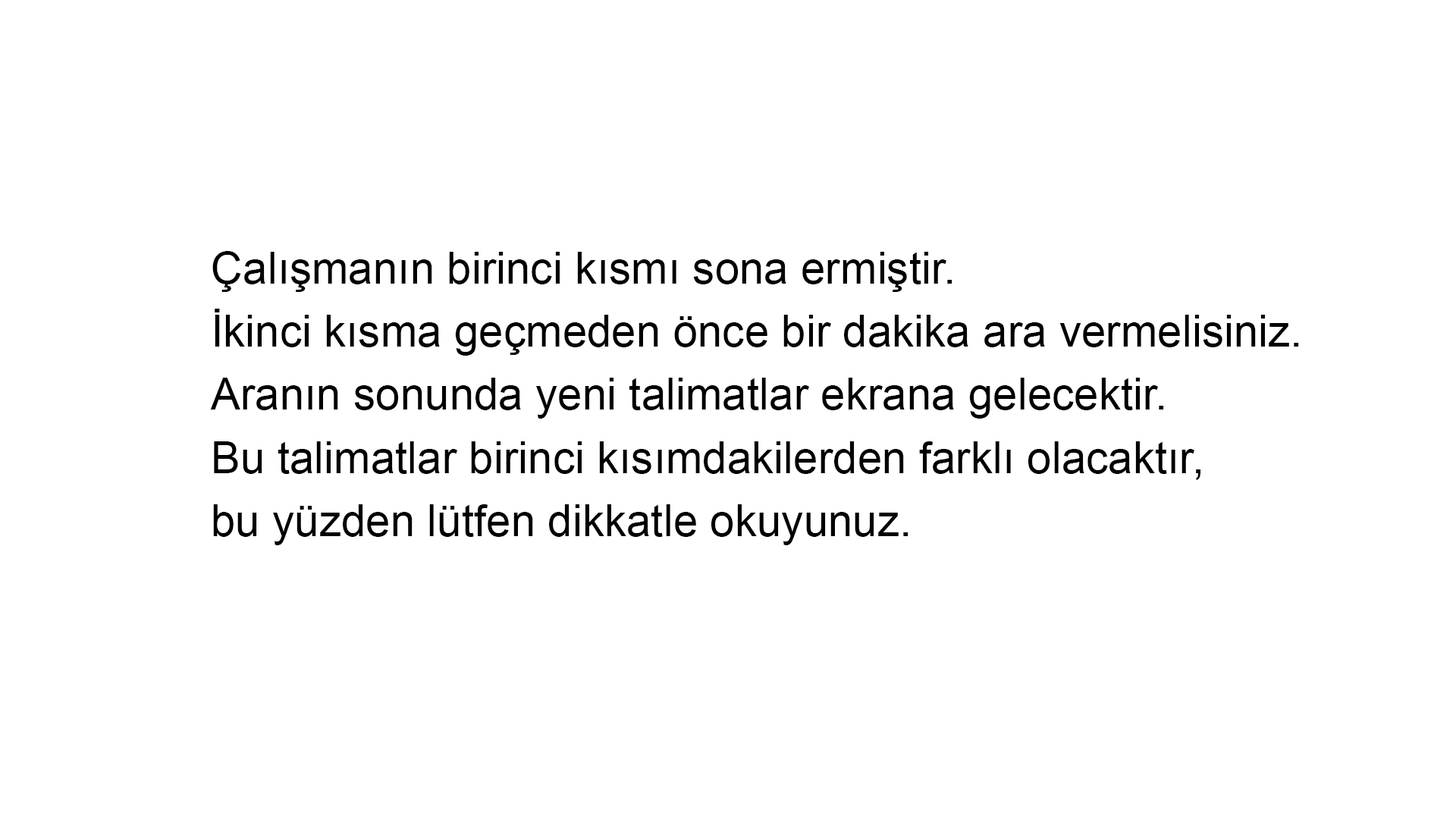
<style>
.page{position:relative;width:1456px;height:819px;background:#ffffff}
.page>*{position:absolute;margin:0}
.t1{font:44.2px/63.2px "ArialMT";color:#000000}
</style>
<div class="page">
<p class="t1" style="left:210px;top:251px;width:1089px;height:294px">Çalışmanın birinci kısmı sona ermiştir.<br>İkinci kısma geçmeden önce bir dakika ara vermelisiniz.<br>Aranın sonunda yeni talimatlar ekrana gelecektir.<br>Bu talimatlar birinci kısımdakilerden farklı olacaktır,<br>bu yüzden lütfen dikkatle okuyunuz.</p>
</div>
